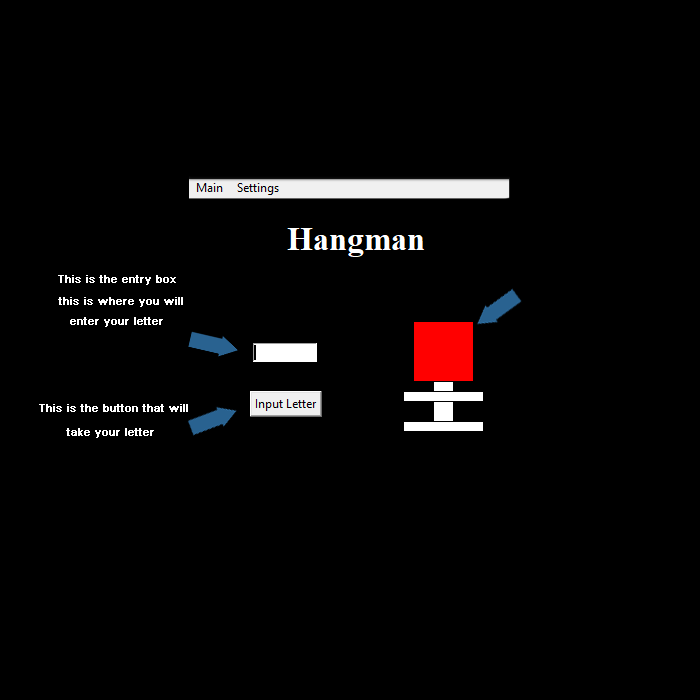
<style>
.page{position:relative;width:700px;height:700px;background:#000000}
.page>*{position:absolute;margin:0}
.t1{font:10.7px "ArialMT";color:#ffffff;font-weight:bold}
</style>
<div class="page">
<p class="t1" style="left:58px;top:275px;width:118px;height:10px">This is the entry box</p>
<p class="t1" style="left:58px;top:297px;width:125px;height:10px">this is where you will</p>
<p class="t1" style="left:70px;top:317px;width:93px;height:10px">enter your letter</p>
<p class="t1" style="left:39px;top:404px;width:149px;height:8px">This is the button that will</p>
<p class="t1" style="left:66px;top:428px;width:88px;height:10px">take your letter</p>
</div>
